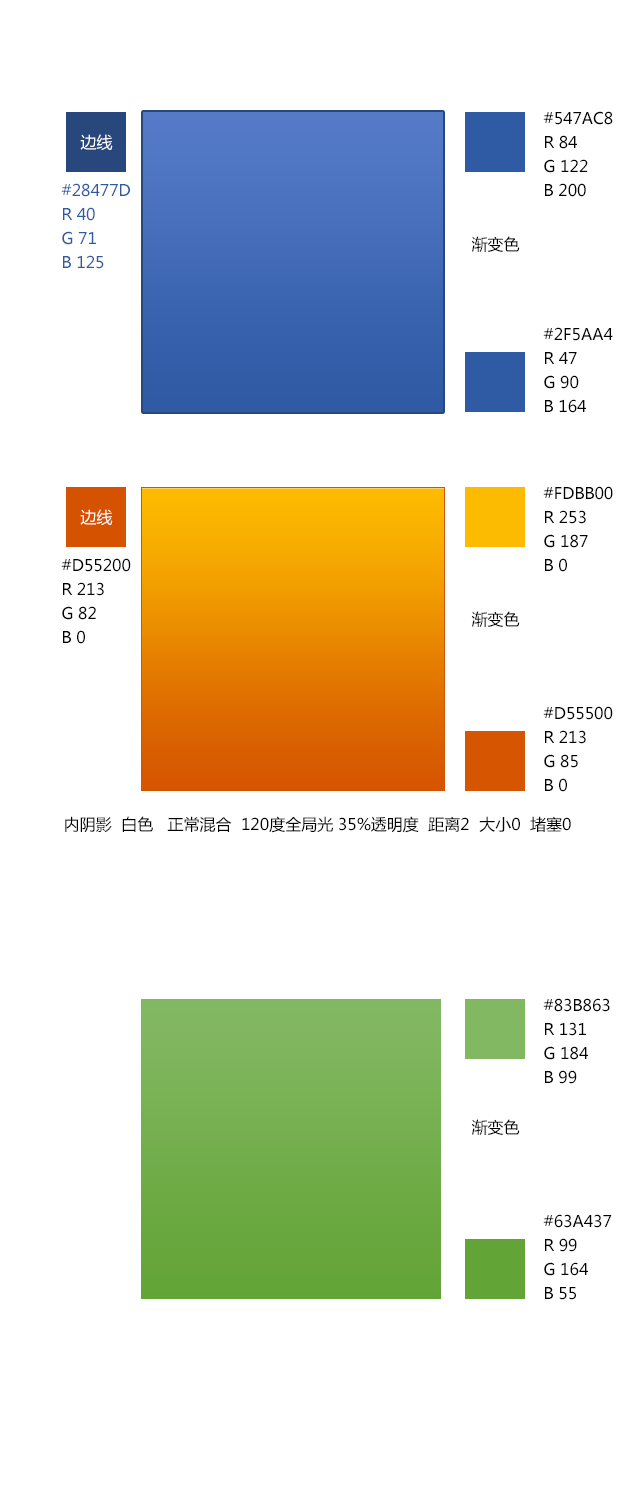
<style>
.page{position:relative;width:640px;height:1500px;background:#ffffff}
.page>*{position:absolute;margin:0}
.t1{font:16px/24px "MicrosoftYaHei";color:#000000;text-transform:uppercase}
.t2{font:16px "MicrosoftYaHei";color:#ffffff;text-transform:uppercase}
.t3{font:16px/24px "MicrosoftYaHei";color:#2f5aa4;text-transform:uppercase}
.t4{font:16px "MicrosoftYaHei";color:#000000;text-transform:uppercase}
</style>
<div class="page">
<p class="t1" style="left:543px;top:111px;width:70px;height:86px">#547ac8<br>R 84<br>G 122<br>B 200</p>
<p class="t2" style="left:80px;top:134px;width:33px;height:16px">边线</p>
<p class="t3" style="left:61px;top:183px;width:69px;height:86px">#28477d<br>R 40<br>G 71<br>B 125</p>
<p class="t4" style="left:471px;top:236px;width:49px;height:16px">渐变色</p>
<p class="t1" style="left:543px;top:327px;width:70px;height:86px">#2f5aa4<br>R 47<br>G 90 <br>B 164</p>
<p class="t1" style="left:543px;top:486px;width:70px;height:86px">#fdbb00<br>R 253 <br>G 187  <br>B 0</p>
<p class="t2" style="left:80px;top:509px;width:33px;height:16px">边线</p>
<p class="t1" style="left:61px;top:558px;width:70px;height:86px">#d55200<br>R 213<br>G 82<br>B 0</p>
<p class="t4" style="left:471px;top:611px;width:49px;height:16px">渐变色</p>
<p class="t1" style="left:543px;top:706px;width:70px;height:86px">#d55500<br>R 213<br>G 85<br>B 0</p>
<p class="t4" style="left:65px;top:816px;width:506px;height:17px">内阴影  白色   正常混合  120度全局光 35%透明度  距离2  大小0  堵塞0</p>
<p class="t1" style="left:543px;top:998px;width:67px;height:86px">#83b863<br>R 131<br>G 184<br>B 99</p>
<p class="t4" style="left:471px;top:1119px;width:49px;height:16px">渐变色</p>
<p class="t1" style="left:543px;top:1214px;width:69px;height:86px">#63a437<br>R 99<br>G 164  <br>B 55</p>
</div>
